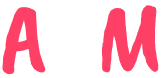
<style>
.page{position:relative;width:163px;height:78px;background:#ffffff}
.page>*{position:absolute;margin:0}
.t1{font:100px "CaveatBrush-Regular";color:#fe4066}
.t2{font:100px "CaveatBrush-Regular";color:#ffffff}
</style>
<div class="page">
<p class="t1" style="left:2px;top:4px;width:157px;height:71px">A<span class="t2">&amp;</span>M</p>
</div>
